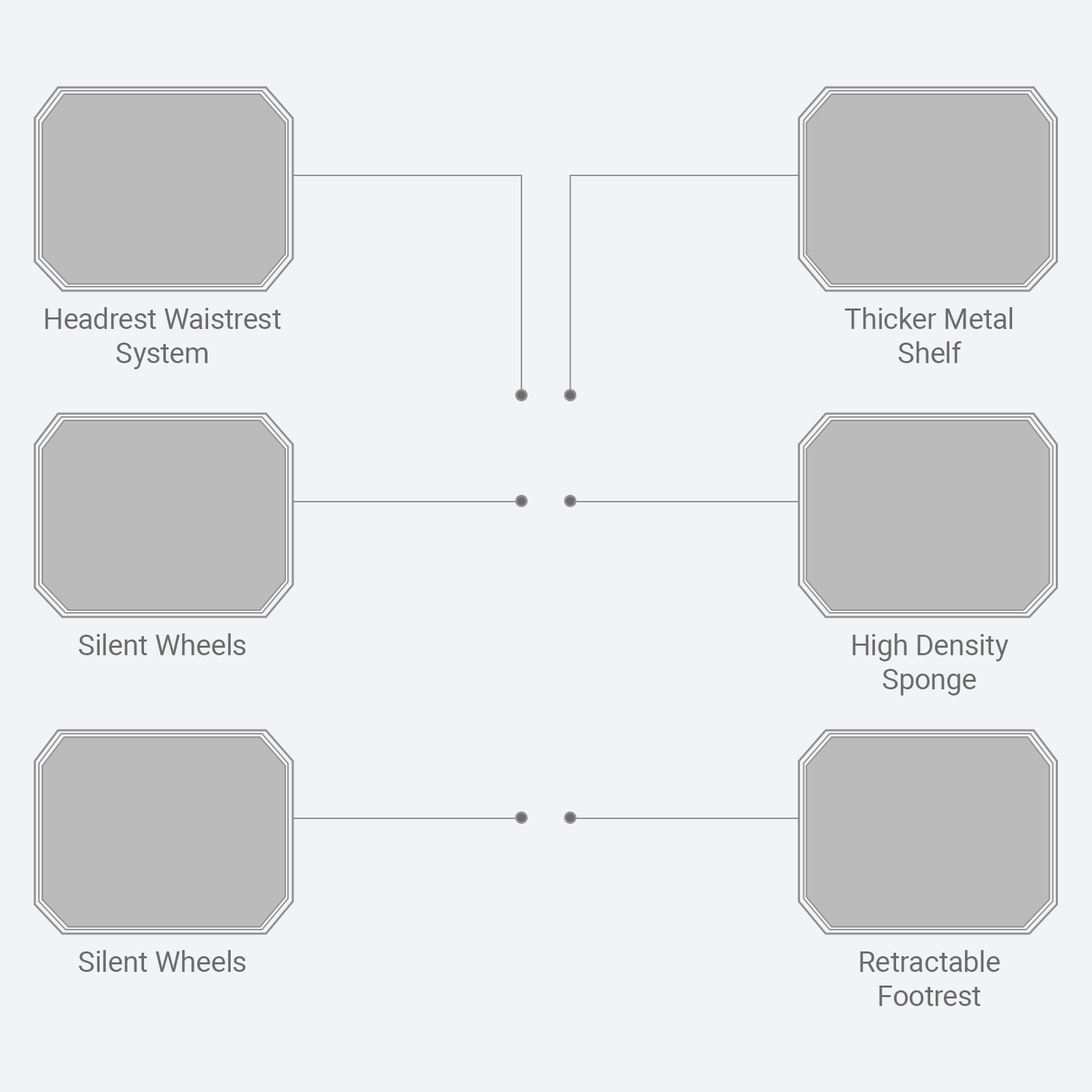
<style>
.page{position:relative;width:1092px;height:1092px;background:#f2f3f6}
.page>*{position:absolute;margin:0}
.t1{font:28.7px "Roboto-Regular";color:#6c6c6c}
</style>
<div class="page">
<p class="t1" style="left:45px;top:307px;width:236px;height:62px;text-align:center">Headrest Waistrest<br>System</p>
<p class="t1" style="left:845px;top:307px;width:167px;height:56px;text-align:center">Thicker Metal<br>Shelf</p>
<p class="t1" style="left:78px;top:633px;width:168px;height:22px">Silent Wheels</p>
<p class="t1" style="left:852px;top:633px;width:157px;height:62px;text-align:center">High Density<br>Sponge</p>
<p class="t1" style="left:78px;top:950px;width:168px;height:22px">Silent Wheels</p>
<p class="t1" style="left:860px;top:950px;width:140px;height:56px;text-align:center">Retractable<br>Footrest</p>
</div>
